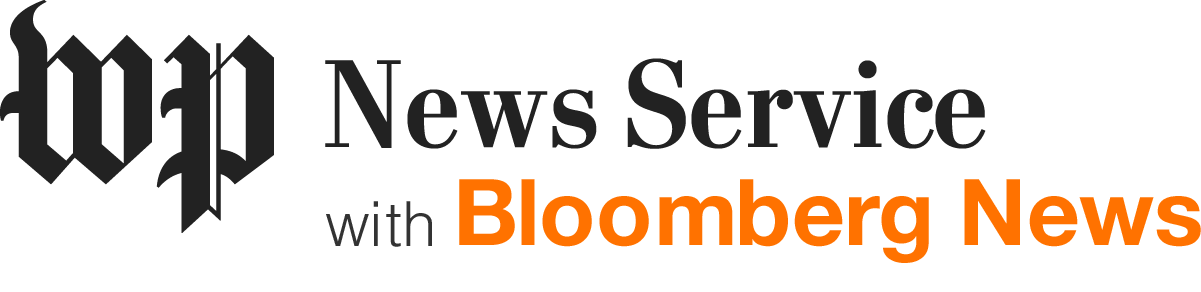
<style>
.page{position:relative;width:1201px;height:292px;background:#ffffff}
.page>*{position:absolute;margin:0}
.t1{font:125.2px "Postoni-Bold";letter-spacing:0.01em;color:#222222}
.t2{font:92.1px "HelveticaNeue-Bold";letter-spacing:-0.01em;color:#ff7200}
.t3{font:62px "Helvetica-Light";letter-spacing:0.01em;color:#333333}
</style>
<div class="page">
<p class="t1" style="left:325px;top:58px;width:661px;height:91px">News Service</p>
<p class="t2" style="left:459px;top:179px;width:742px;height:84px">Bloomberg News</p>
<p class="t3" style="left:326px;top:201px;width:106px;height:46px">with</p>
</div>
